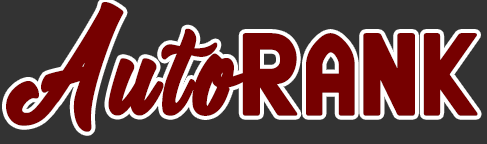
<style>
.page{position:relative;width:487px;height:144px;background:#333333}
.page>*{position:absolute;margin:0}
.t1{font:100.3px "MasterofComicsPersonalUse";letter-spacing:0.07em;color:#760000;font-weight:bold;scale:0.89 1}
.t2{font:100.3px "Beer";letter-spacing:0.07em;color:#760000;font-weight:bold;scale:0.89 1}
</style>
<div class="page">
<p class="t1" style="left:6px;top:2px;width:472px;height:130px">Auto<span class="t2">Rank</span></p>
</div>
